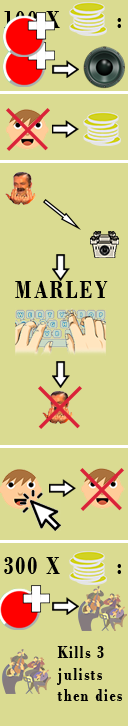
<style>
.page{position:relative;width:128px;height:726px;background:#dadb91}
.page>*{position:absolute;margin:0}
.t1{font:25px "BodoniMT-Bold";letter-spacing:0.1em;scale:0.8 1}
.t2{font:25px "BodoniMT-Bold";letter-spacing:0.1em;color:#000000;scale:0.8 1}
.t3{font:18px "BodoniMT-Bold";letter-spacing:0.1em;color:#000000;scale:0.8 1}
</style>
<div class="page">
<p class="t1" style="left:4px;top:11px;width:117px;height:17px">100 X        :</p>
<p class="t2" style="left:15px;top:281px;width:93px;height:17px">MARLEY</p>
<p class="t2" style="left:4px;top:557px;width:117px;height:17px">300 X        :</p>
<p class="t3" style="left:57px;top:646px;width:65px;height:55px">Kills 3 julists then dies</p>
</div>
